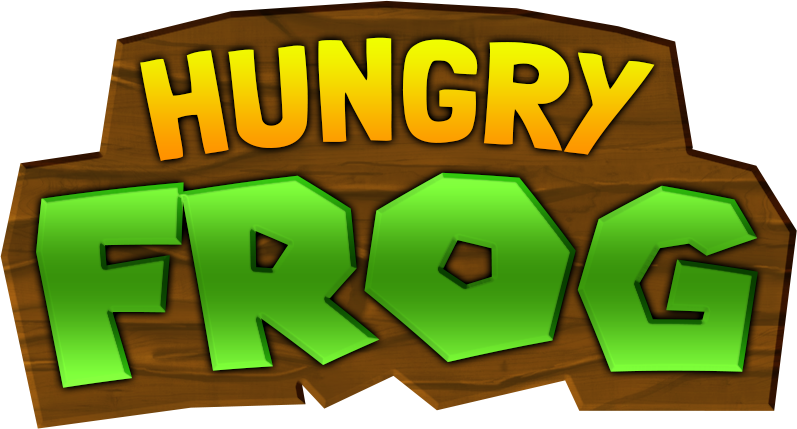
<style>
.page{position:relative;width:797px;height:429px;background:#ffffff}
.page>*{position:absolute;margin:0}
.t1{font:144px "LondrinaSolid-Regular";text-transform:uppercase;scale:1.11 1}
.t2{font:256px "SuperMarioGalaxy"}
</style>
<div class="page">
<p class="t1" style="left:140px;top:37px;width:515px;height:125px">HUNGRY</p>
<p class="t2" style="left:36px;top:172px;width:722px;height:216px">frog</p>
</div>
